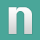
<style>
.page{position:relative;width:40px;height:40px;background:#4aa699}
.page>*{position:absolute;margin:0}
.t1{font:46px "Silom";color:#e8e8e8}
</style>
<div class="page">
<p class="t1" style="left:8px;top:7px;width:24px;height:27px">n</p>
</div>
